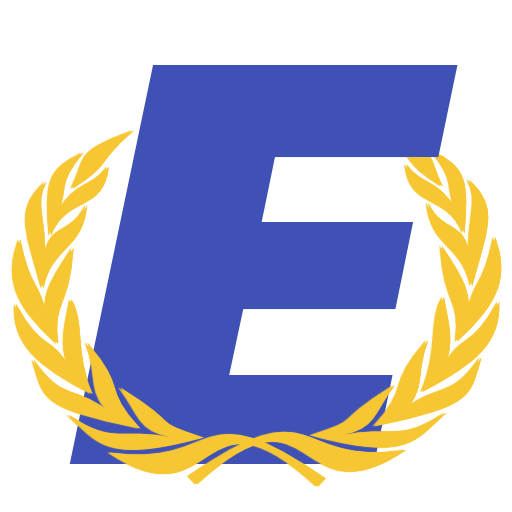
<style>
.page{position:relative;width:512px;height:512px;background:#ffffff}
.page>*{position:absolute;margin:0}
.t1{font:558.8px "FuturaBT-BoldItalic";color:#3f51b5;font-variant:small-caps;scale:1.32 1}
</style>
<div class="page">
<p class="t1" style="left:69px;top:65px;width:389px;height:399px">E</p>
</div>
